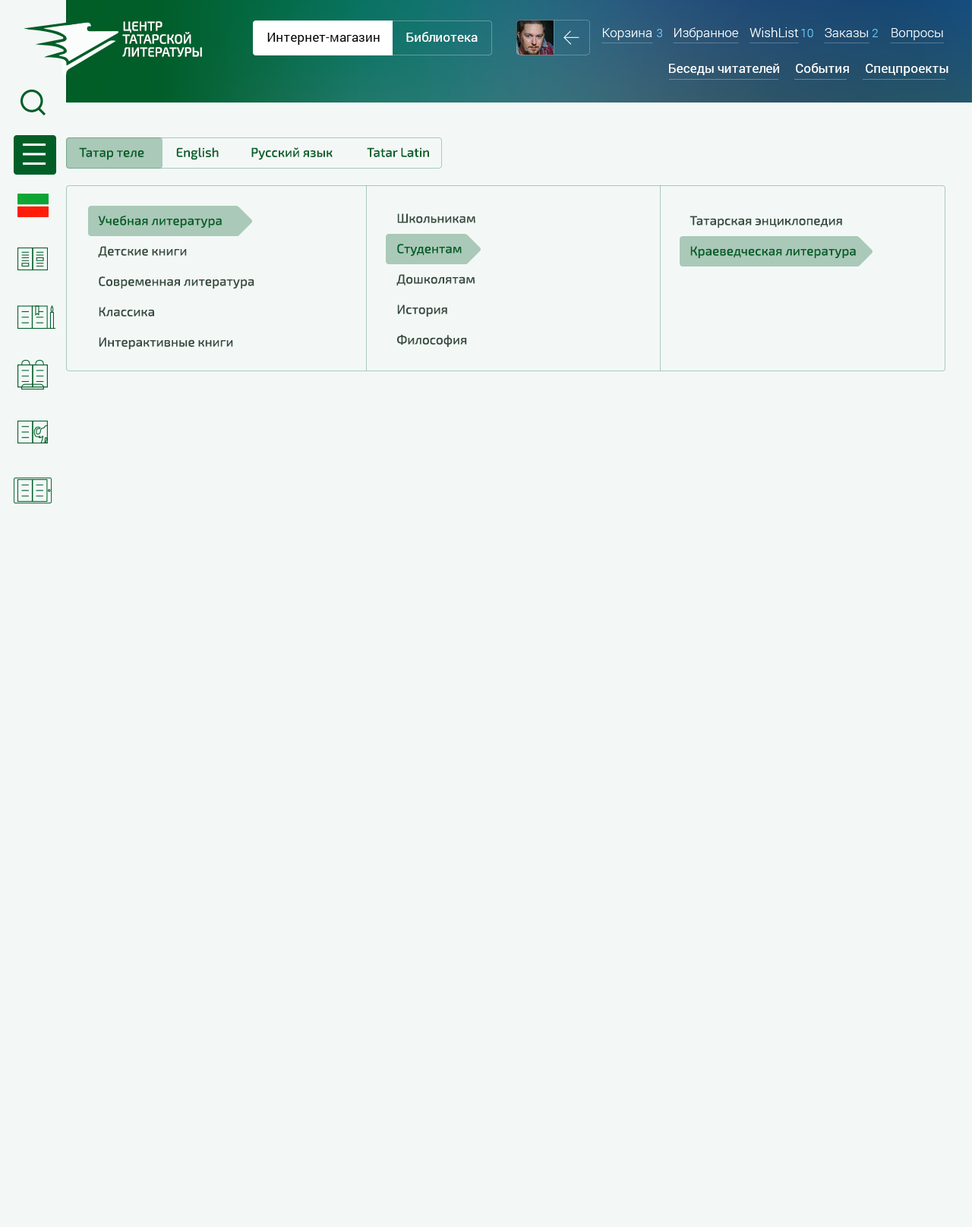
<style>
.page{position:relative;width:972px;height:1227px;background:#f3f8f7}
.page>*{position:absolute;margin:0}
.t1{font:12.9px/12.9px "Exo2-Medium";color:#ffffff}
.t2{font:12.9px "Roboto-Regular";color:#010101}
.t3{font:12.9px "Roboto-Regular";color:#ffffff}
.t4{font:12.9px "Exo2-Medium";color:#015e27}
.t5{font:12.9px/15.2px "Exo2-Medium";color:#364b3e}
.t6{font:12.9px/15.2px "Exo2-Medium";color:#015e27}
</style>
<div class="page">
<p class="t1" style="left:122px;top:21px;width:80px;height:36px">ЦЕНТР<br>ТАТАРСКОЙ<br>ЛИТЕРАТУРЫ</p>
<p class="t2" style="left:267px;top:33px;width:113px;height:12px">Интернет-магазин</p>
<p class="t3" style="left:406px;top:32px;width:72px;height:10px">Библиотека</p>
<p class="t3" style="left:669px;top:63px;width:279px;height:13px">Беседы читателей     События     Спецпроекты</p>
<p class="t4" style="left:79px;top:147px;width:350px;height:13px">Татар теле           English           Русский язык            Tatar Latin</p>
<p class="t5" style="left:98px;top:215px;width:156px;height:134px"><span class="t6">Учебная литература<br></span><br>Детские книги<br><br>Современная литература<br><br>Классика<br><br>Интерактивные книги</p>
<p class="t5" style="left:396px;top:213px;width:79px;height:134px">Школьникам<br><br><span class="t6">Студентам<br></span><br>Дошколятам<br><br>История<br><br>Философия</p>
<p class="t6" style="left:689px;top:216px;width:167px;height:42px"><span class="t5">Татарская энциклопедия<br><br></span>Краеведческая литература</p>
</div>
